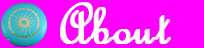
<style>
.page{position:relative;width:204px;height:48px;background:#ff00ff}
.page>*{position:absolute;margin:0}
.t1{font:60px "FrenchScriptMT";color:#ffffff;font-weight:bold}
</style>
<div class="page">
<p class="t1" style="left:60px;top:2px;width:111px;height:42px">About</p>
</div>
